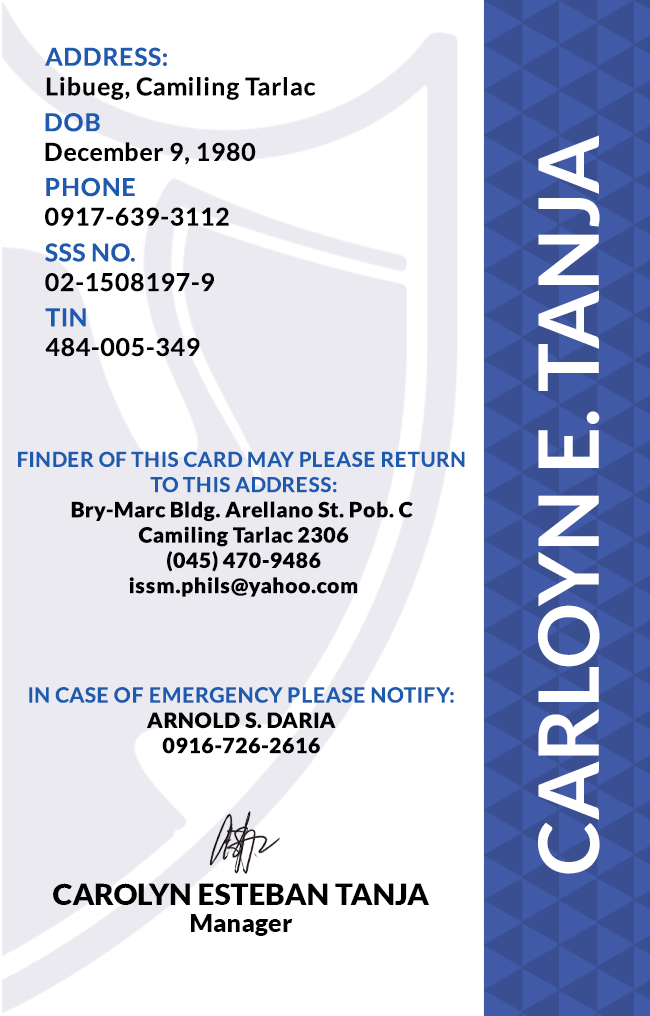
<style>
.page{position:relative;width:650px;height:1016px;background:#ffffff}
.page>*{position:absolute;margin:0}
.t1{font:24.7px/29.6px "Lato-Bold";letter-spacing:0.025em;color:#000000}
.t2{font:24.7px/29.6px "Lato-Bold";letter-spacing:0.025em;color:#1c5bb0}
.t3{font:83.3px "Lato-Bold";color:#ffffff}
.t4{font:24.7px/29.6px "Lato-Bold";letter-spacing:0.025em}
.t5{font:21.1px "Lato-Black";letter-spacing:0.025em}
.t6{font:20.5px/25.3px "Lato-Bold";letter-spacing:0.025em;text-transform:uppercase}
.t7{font:21.1px/25.3px "Lato-Bold";letter-spacing:0.025em;color:#1c5bb0}
.t8{font:21.1px "Lato-Black";letter-spacing:0.025em;color:#000000}
.t9{font:29.5px "Lato-Black";color:#000000}
.t10{font:25px "Lato-Black";color:#000000}
</style>
<div class="page">
<p class="t1" style="left:45px;top:47px;width:271px;height:53px"><span class="t2">ADDRESS:<br></span>Libueg, Camiling Tarlac</p>
<p class="t1" style="left:45px;top:113px;width:211px;height:52px">DOB<br>December 9, 1980</p>
<p class="t3" style="left:538px;top:135px;width:62px;height:739px;rotate:-90deg">CARLOYN E. TANJA</p>
<p class="t4" style="left:45px;top:177px;width:184px;height:49px">PHONE <br>0917-639-3112</p>
<p class="t4" style="left:45px;top:243px;width:169px;height:49px">SSS NO.<br>02-1508197-9</p>
<p class="t1" style="left:45px;top:308px;width:155px;height:49px">TIN<br>484-005-349</p>
<p class="t5" style="left:18px;top:451px;width:447px;height:146px;text-align:center"><span class="t6">Finder of this card may please return <br>to this address:<br></span>Bry-Marc Bldg. Arellano St. Pob. C <br>Camiling Tarlac 2306<br>(045) 470-9486<br>issm.phils@yahoo.com</p>
<p class="t7" style="left:29px;top:687px;width:425px;height:67px;text-align:center">IN CASE OF EMERGENCY PLEASE NOTIFY:<br><span class="t8">ARNOLD S. DARIA<br>0916-726-2616</span></p>
<p class="t9" style="left:53px;top:883px;width:376px;height:22px">CAROLYN ESTEBAN TANJA</p>
<p class="t10" style="left:191px;top:914px;width:102px;height:22px">Manager</p>
</div>
